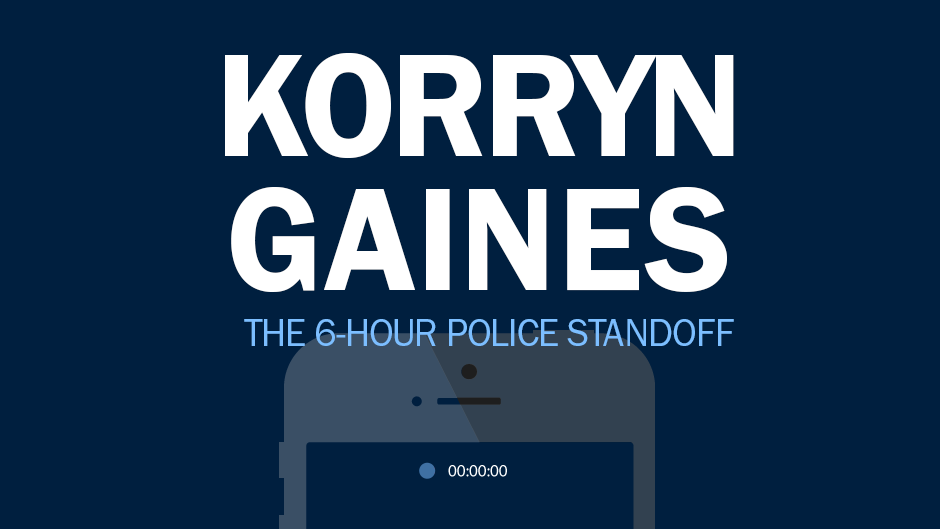
<style>
.page{position:relative;width:940px;height:529px;background:#001f3f}
.page>*{position:absolute;margin:0}
.t1{font:151px/133.6px "FranklinGothicURW-Dem";letter-spacing:-0.04em;color:#ffffff;text-transform:uppercase}
.t2{font:151px/133.6px "FranklinGothicURW-Dem";color:#ffffff;text-transform:uppercase}
.t3{font:38.8px "FranklinGothicURW-Boo";letter-spacing:-0.025em;color:#7cbeff;text-transform:uppercase}
</style>
<div class="page">
<p class="t1" style="left:225px;top:53px;width:509px;height:240px;text-align:center">KORRYN<br><span class="t2">GAINES</span></p>
<p class="t3" style="left:244px;top:319px;width:490px;height:27px">THE 6-HOUR POLICE STANDOFF</p>
</div>
